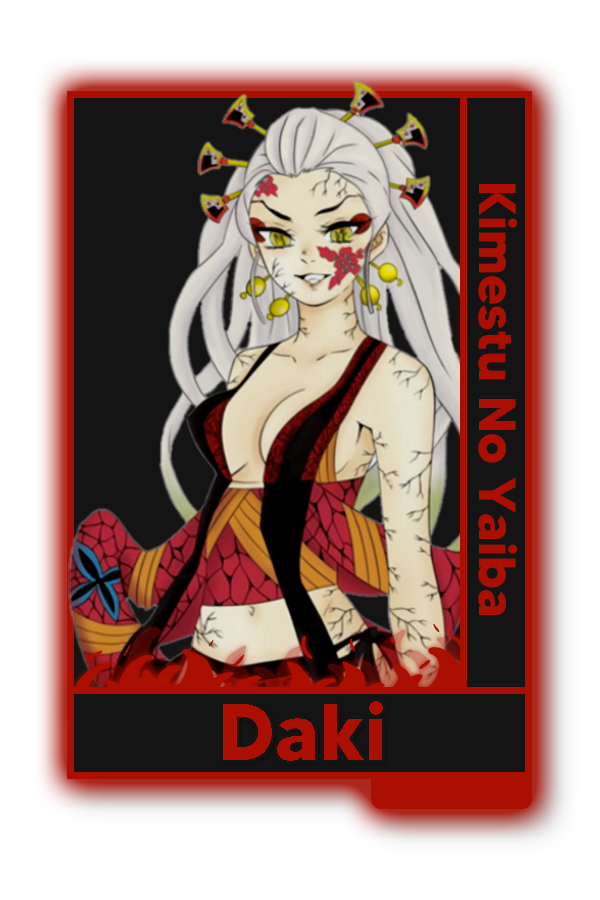
<style>
.page{position:relative;width:600px;height:900px;background:#141414}
.page>*{position:absolute;margin:0}
.t1{font:52px "MADETOMMY-Bold";color:#ab0f01}
.t2{font:79.9px "MADETOMMY-Bold";color:#ab0f01}
</style>
<div class="page">
<p class="t1" style="left:478px;top:184px;width:40px;height:431px;rotate:90deg">Kimestu No Yaiba</p>
<p class="t2" style="left:223px;top:701px;width:160px;height:60px">Daki</p>
</div>
